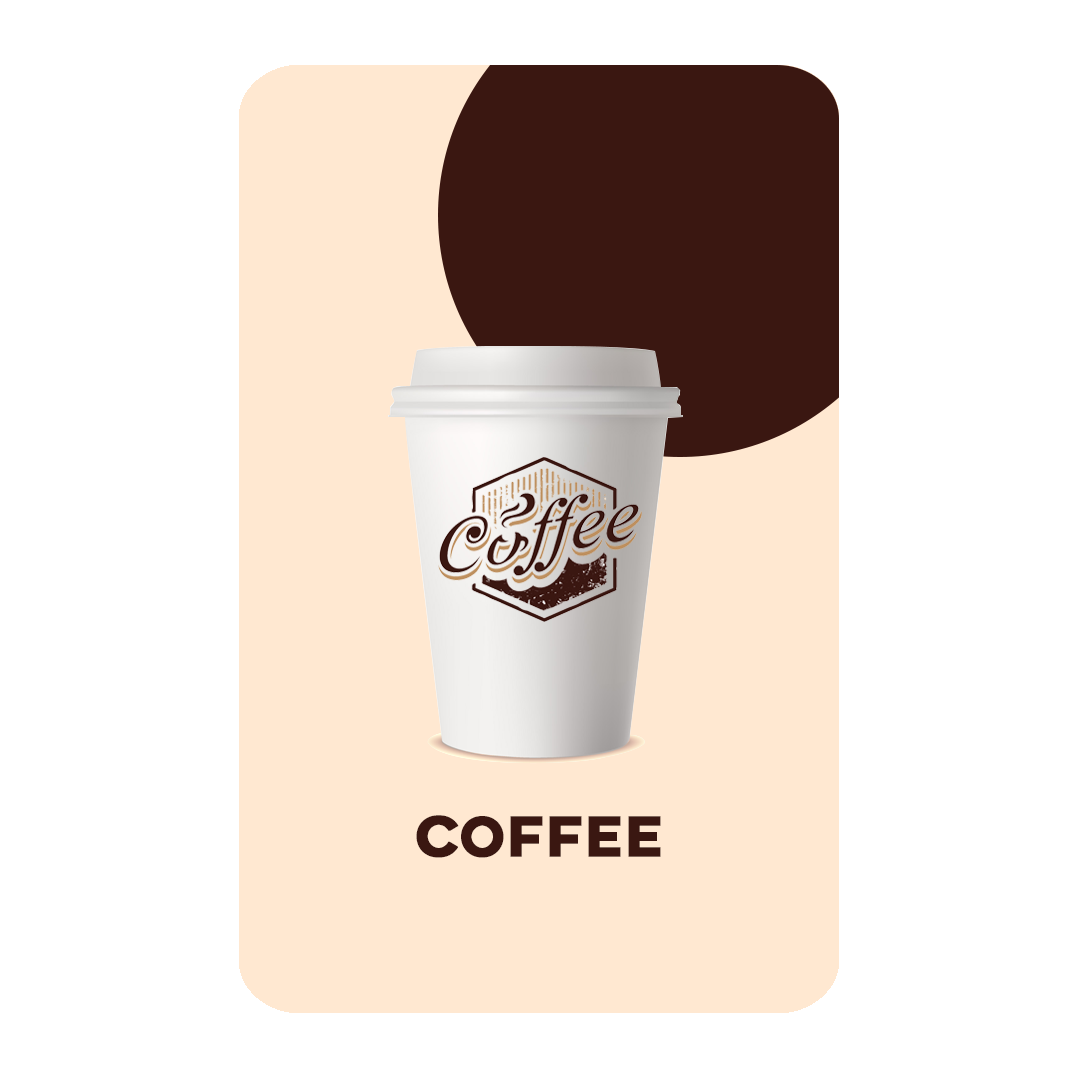
<style>
.page{position:relative;width:1080px;height:1080px;background:#ffffff}
.page>*{position:absolute;margin:0}
.t1{font:58.4px "AXIS-ExtraBold";color:#3a1711;font-weight:bold}
</style>
<div class="page">
<p class="t1" style="left:416px;top:815px;width:245px;height:43px">COFFEE</p>
</div>
